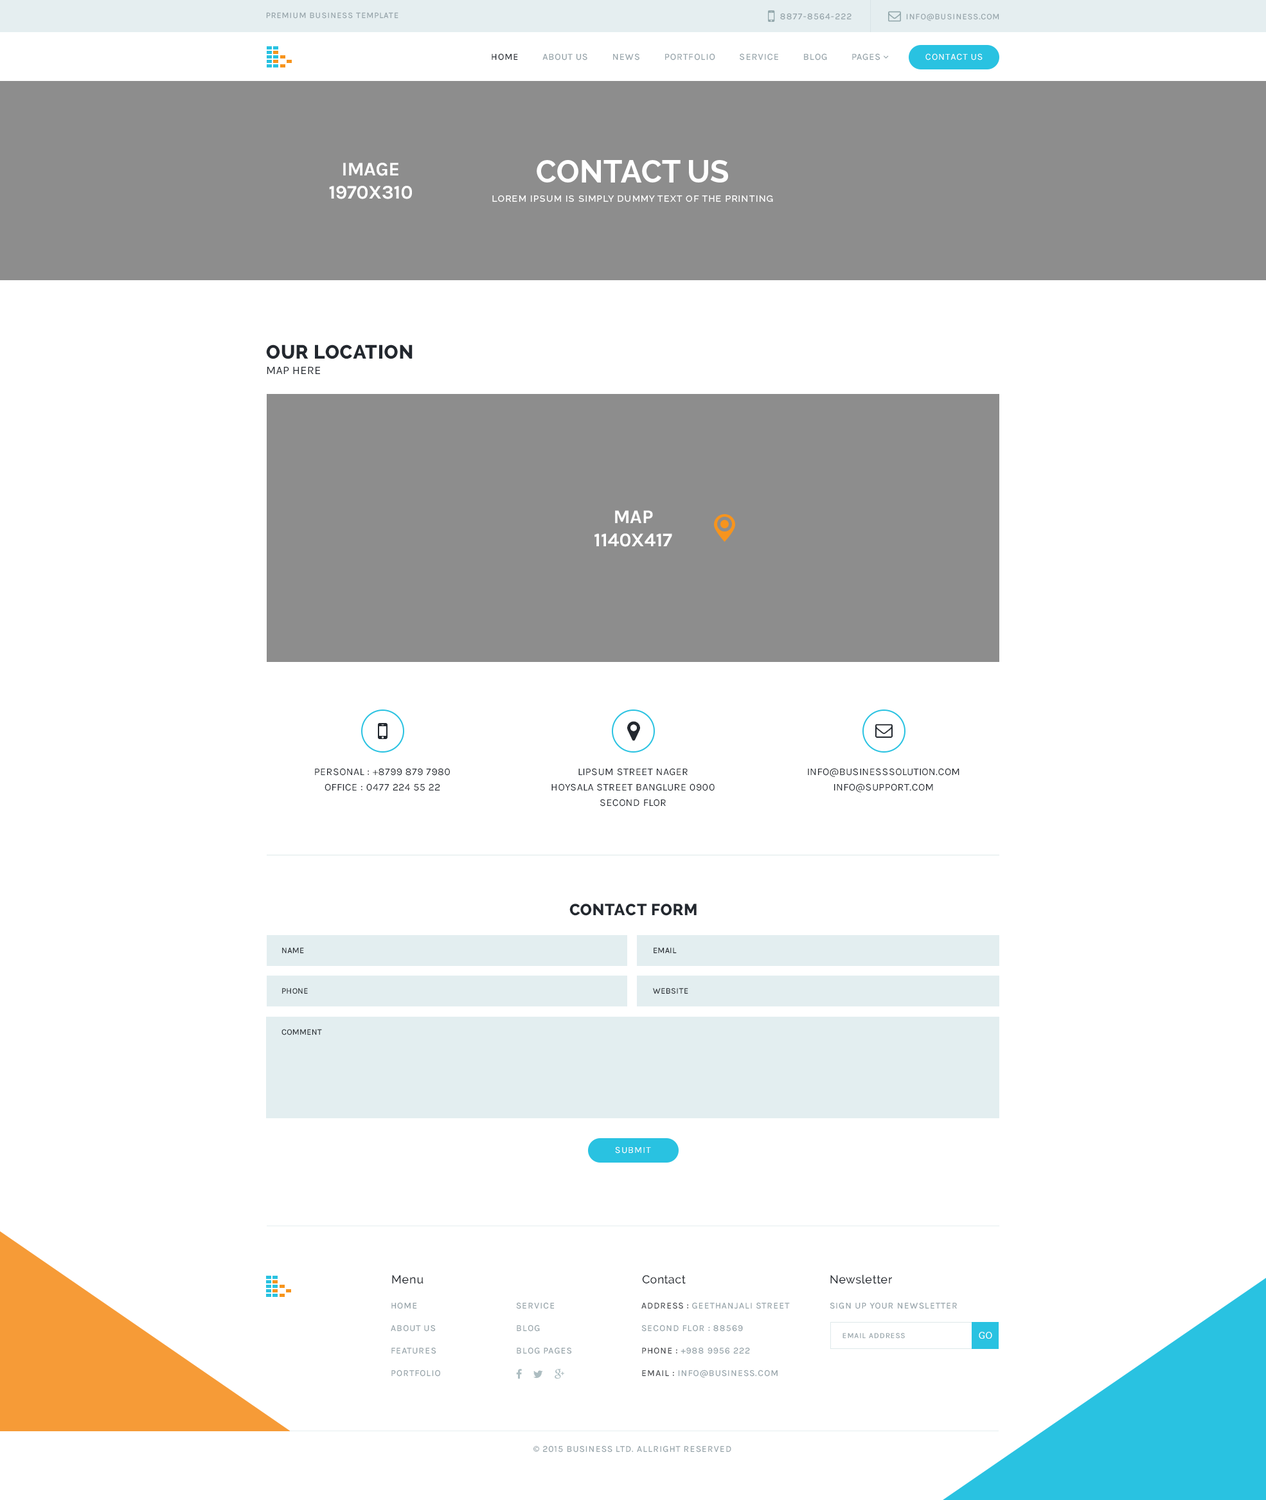
<style>
.page{position:relative;width:1266px;height:1500px;background:#ffffff}
.page>*{position:absolute;margin:0}
.t1{font:8.4px "Karla-Regular";letter-spacing:0.075em;color:#93a1a7;text-transform:uppercase}
.t2{font:9px "Karla-Regular";letter-spacing:0.075em;color:#93a1a7;text-transform:uppercase}
.t3{font:9.3px "Karla-Regular";letter-spacing:0.075em;color:#93a1a7;text-transform:uppercase}
.t4{font:9.3px "Karla-Regular";letter-spacing:0.075em;color:#23282f;text-transform:uppercase}
.t5{font:9.3px "Karla-Regular";letter-spacing:0.075em;color:#ffffff;text-transform:uppercase}
.t6{font:9px/19.3px "Raleway-Medium";letter-spacing:0.075em;color:#ffffff;text-transform:uppercase}
.t7{font:30.9px/19.3px "Raleway-Bold";color:#ffffff;text-transform:uppercase}
.t8{font:19.3px "Karla-Bold";letter-spacing:-0.01em;color:#ffffff;text-transform:uppercase}
.t9{font:19.3px/15.4px "Raleway-ExtraBold";letter-spacing:0.025em;color:#23282f;text-transform:uppercase}
.t10{font:11.6px/15.4px "Karla-Regular";letter-spacing:0.025em;color:#23282f;text-transform:uppercase}
.t11{font:10.3px/15.4px "Karla-Regular";letter-spacing:0.025em;color:#23282f;text-transform:uppercase}
.t12{font:16.1px "Raleway-ExtraBold";letter-spacing:0.025em;color:#23282f;text-transform:uppercase}
.t13{font:8.4px "Karla-Regular";letter-spacing:0.025em;color:#23282f;text-transform:uppercase}
.t14{font:11.6px "Raleway-Medium";letter-spacing:0.025em;color:#23282f}
.t15{font:9px/22.5px "Karla-Regular";letter-spacing:0.075em;color:#93a1a7;text-transform:uppercase}
.t16{font:9px/22.5px "Karla-Regular";letter-spacing:0.075em;color:#3e4146;text-transform:uppercase}
.t17{font:7.7px "Karla-Regular";letter-spacing:0.075em;color:#93a1a7;text-transform:uppercase}
.t18{font:9.6px "RobotoSlab-Regular";letter-spacing:0.025em;color:#ffffff}
.t19{font:9px "MyriadPro-Regular";letter-spacing:0.075em;color:#93a1a7;text-transform:uppercase}
</style>
<div class="page">
<p class="t1" style="left:266px;top:12px;width:133px;height:7px">premium business template</p>
<p class="t2" style="left:780px;top:13px;width:72px;height:7px">8877-8564-222</p>
<p class="t1" style="left:906px;top:14px;width:94px;height:7px">info@business.com</p>
<p class="t3" style="left:492px;top:53px;width:389px;height:7px"><span class="t4">Home         </span>About Us         News         Portfolio         Service         Blog         Pages</p>
<p class="t5" style="left:926px;top:53px;width:57px;height:7px">Contact Us</p>
<p class="t6" style="left:492px;top:160px;width:281px;height:42px;text-align:center"><span class="t7">contact us<br></span>Lorem Ipsum is simply dummy text of the printing</p>
<p class="t8" style="left:329px;top:163px;width:83px;height:36px;text-align:center">Image<br>1970x310</p>
<p class="t9" style="left:266px;top:345px;width:147px;height:29px">Our location<br><span class="t10">Map here</span></p>
<p class="t8" style="left:595px;top:510px;width:77px;height:37px;text-align:center">Map<br>1140x417</p>
<p class="t11" style="left:315px;top:768px;width:135px;height:23px;text-align:center">personal : +8799 879 7980<br>Office : 0477 224 55 22</p>
<p class="t11" style="left:552px;top:768px;width:163px;height:39px;text-align:center">lipsum street nager<br>hoysala street banglure 0900<br>second flor</p>
<p class="t11" style="left:808px;top:768px;width:152px;height:25px;text-align:center">info@businesssolution.com<br>info@support.com</p>
<p class="t12" style="left:570px;top:904px;width:127px;height:12px">Contact form</p>
<p class="t13" style="left:282px;top:948px;width:22px;height:6px">Name</p>
<p class="t13" style="left:654px;top:948px;width:23px;height:6px">Email</p>
<p class="t13" style="left:282px;top:988px;width:26px;height:7px">Phone</p>
<p class="t13" style="left:653px;top:988px;width:35px;height:7px">website</p>
<p class="t13" style="left:282px;top:1029px;width:40px;height:7px">Comment</p>
<p class="t5" style="left:615px;top:1147px;width:36px;height:7px">Submit</p>
<p class="t14" style="left:392px;top:1275px;width:32px;height:9px">Menu</p>
<p class="t14" style="left:642px;top:1275px;width:44px;height:9px">Contact</p>
<p class="t14" style="left:831px;top:1275px;width:61px;height:9px">Newsletter</p>
<p class="t15" style="left:391px;top:1302px;width:49px;height:75px">Home<br>About Us<br>Features<br>Portfolio</p>
<p class="t15" style="left:516px;top:1302px;width:56px;height:52px">Service<br>Blog<br>Blog Pages</p>
<p class="t15" style="left:642px;top:1302px;width:148px;height:76px"><span class="t16">Address : </span>Geethanjali street<br>Second flor : 88569<br><span class="t16">Phone :</span> +988 9956 222<br><span class="t16">Email :</span> info@business.com</p>
<p class="t2" style="left:830px;top:1302px;width:127px;height:8px">Sign up your newsletter</p>
<p class="t17" style="left:843px;top:1333px;width:62px;height:6px">Email Address</p>
<p class="t18" style="left:979px;top:1332px;width:14px;height:8px">GO</p>
<p class="t2" style="left:534px;top:1446px;width:198px;height:7px"><span class="t19">©</span> 2015 business Ltd. allright reserved</p>
</div>
